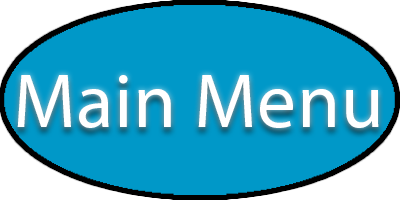
<style>
.page{position:relative;width:400px;height:200px;background:#0098c8}
.page>*{position:absolute;margin:0}
.t1{font:77.4px "MyriadPro-Regular";letter-spacing:0.01em;color:#ffffff}
</style>
<div class="page">
<p class="t1" style="left:17px;top:75px;width:362px;height:53px">Main Menu</p>
</div>
